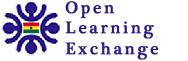
<style>
.page{position:relative;width:188px;height:61px;background:#ffffff}
.page>*{position:absolute;margin:0}
.t1{font:17px "PlantagenetCherokee";letter-spacing:0.14em;color:#291888;font-weight:bold}
</style>
<div class="page">
<p class="t1" style="left:65px;top:1px;width:94px;height:59px">Open <br>Learning<br>Exchange</p>
</div>
